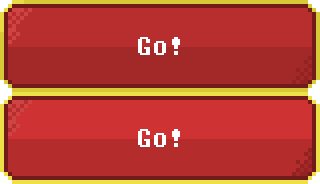
<style>
.page{position:relative;width:320px;height:184px}
.page>*{position:absolute;margin:0}
.t1{font:32px "Fixedsys";letter-spacing:0.01em;color:#ffffff}
</style>
<div class="page">
<p class="t1" style="left:138px;top:37px;width:42px;height:18px">Go!</p>
<p class="t1" style="left:138px;top:129px;width:42px;height:18px">Go!</p>
</div>
